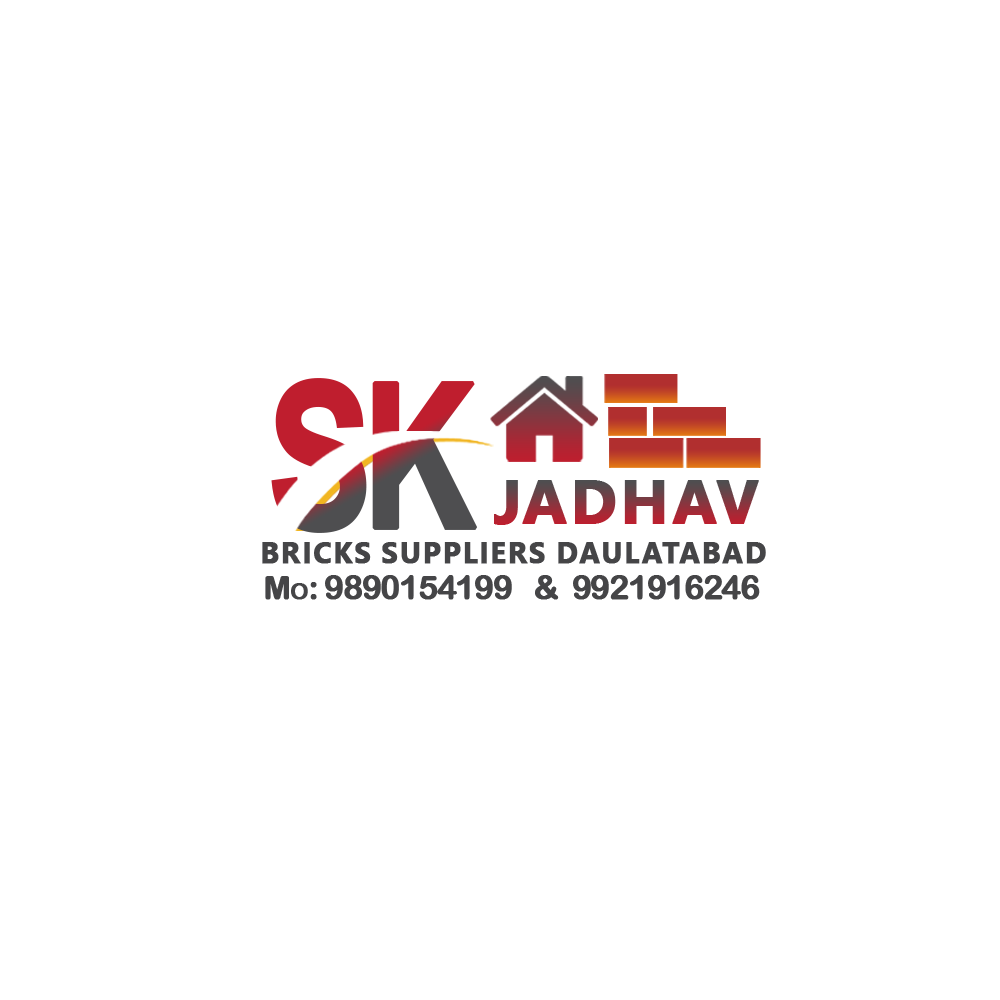
<style>
.page{position:relative;width:1000px;height:1000px;background:#ffffff}
.page>*{position:absolute;margin:0}
.t1{font:202.2px "Arial-BoldMT";letter-spacing:-0.12em;text-transform:uppercase;font-weight:bold;scale:0.77 1}
.t2{font:62.4px "SegoeUI-Bold";text-transform:uppercase;font-weight:bold}
.t3{font:29.4px "SegoeUI-Bold";color:#454547;text-transform:uppercase;font-weight:bold}
.t4{font:33.3px "ArialRoundedMTBold";letter-spacing:-0.06em;color:#454547;font-variant:small-caps;font-weight:bold}
</style>
<div class="page">
<p class="t1" style="left:271px;top:378px;width:207px;height:155px">sk</p>
<p class="t2" style="left:494px;top:480px;width:265px;height:45px">jadhav</p>
<p class="t3" style="left:262px;top:542px;width:504px;height:22px">Bricks suppliers DAULATABAD</p>
<p class="t4" style="left:265px;top:575px;width:495px;height:25px">Mo: 9890154199   &amp;  9921916246</p>
</div>
